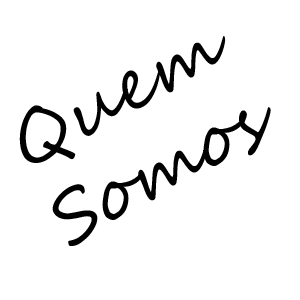
<style>
.page{position:relative;width:300px;height:300px;background:#ffffff}
.page>*{position:absolute;margin:0}
.t1{font:72px "SegoeScript";color:#000000}
</style>
<div class="page">
<p class="t1" style="left:19px;top:36px;width:252px;height:210px;rotate:-28deg">Quem Somos</p>
</div>
